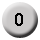
<style>
.page{position:relative;width:40px;height:40px;background:#ffffff}
.page>*{position:absolute;margin:0}
.t1{font:18px "ArialMT";color:#000000}
</style>
<div class="page">
<p class="t1" style="left:15px;top:13px;width:8px;height:13px">0</p>
</div>
